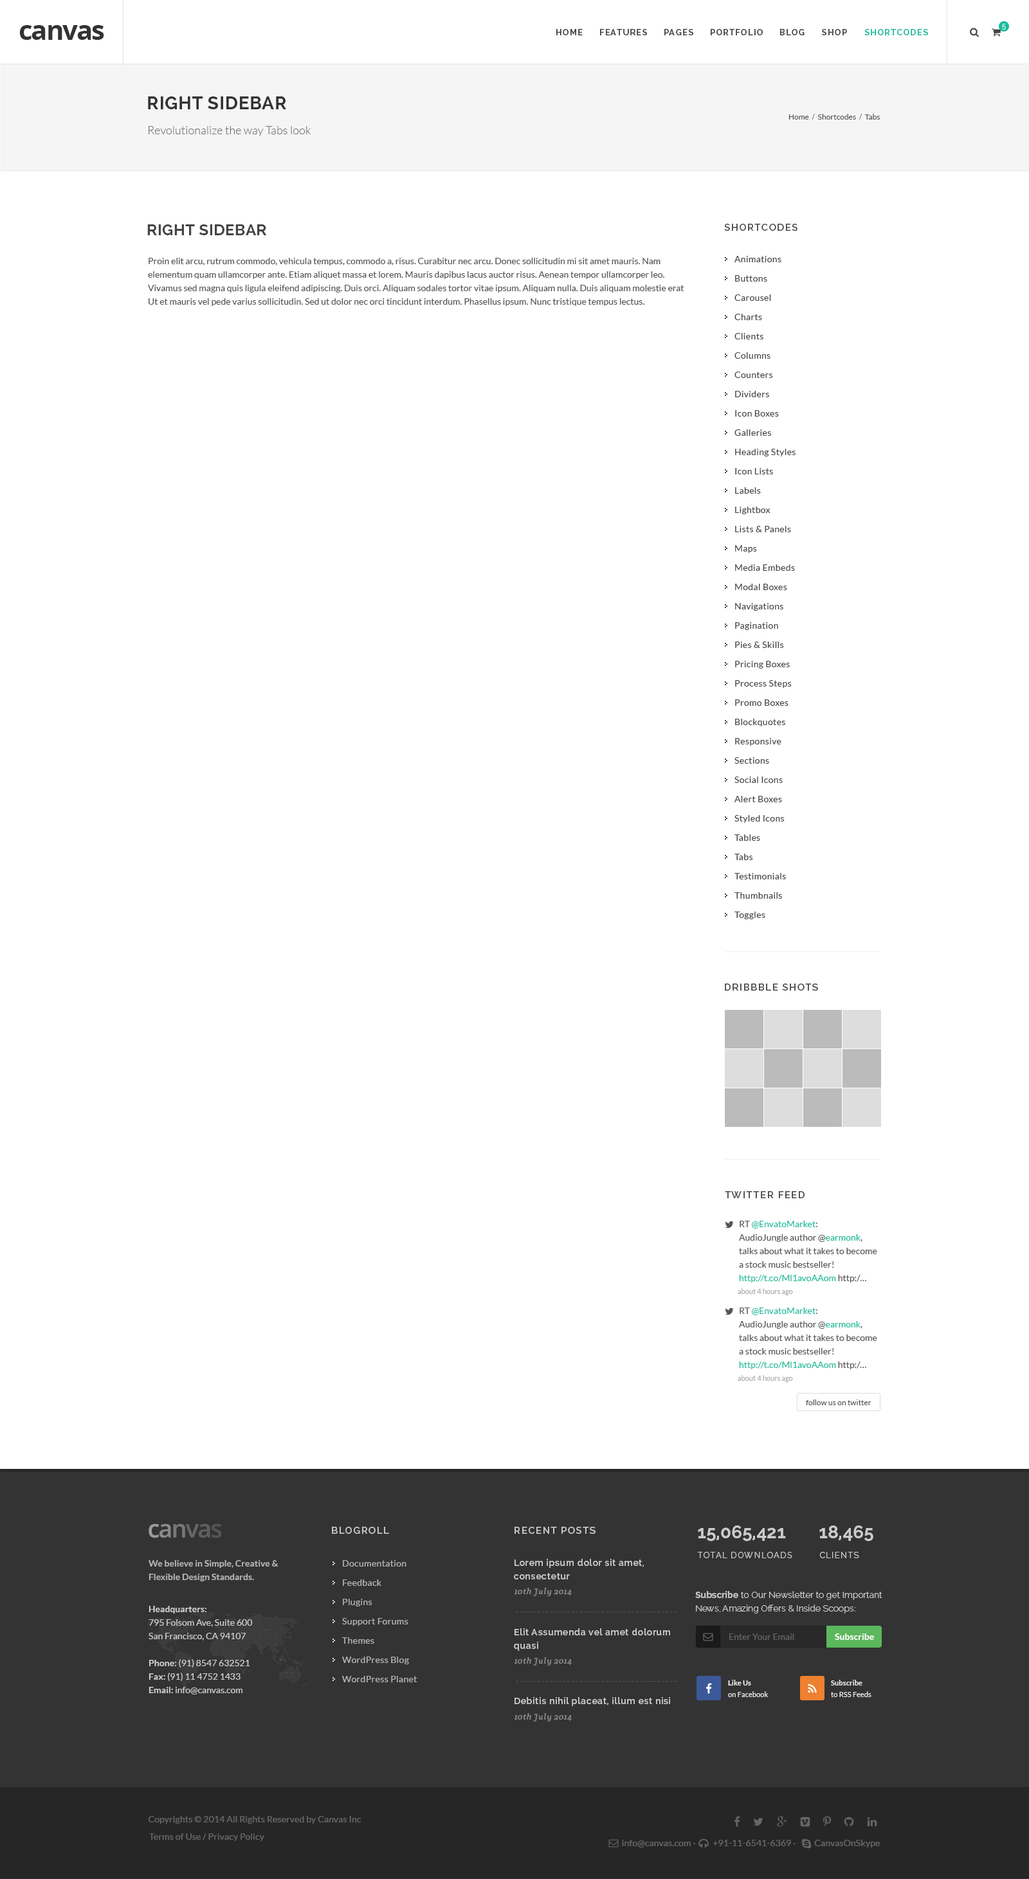
<style>
.page{position:relative;width:1029px;height:1879px;background:#ffffff}
.page>*{position:absolute;margin:0}
.t1{font:27px "OpenSans-Bold";letter-spacing:-0.05em;color:#333333}
.t2{font:8.4px "Raleway-Bold";letter-spacing:0.1em;color:#444444}
.t3{font:8.4px "Raleway-Bold";letter-spacing:0.1em;color:#1abc9c}
.t4{font:7.1px "Raleway-Light";letter-spacing:0.1em;color:#ffffff}
.t5{font:18px "Raleway-Bold";letter-spacing:0.025em;color:#333333;text-transform:uppercase}
.t6{font:7.7px "Lato-Regular";color:#555555}
.t7{font:7.7px "Lato-Regular";color:#777777}
.t8{font:11.6px "Lato-Light";color:#777777}
.t9{font:15.4px "Raleway-Bold";letter-spacing:0.025em;color:#444444;text-transform:uppercase}
.t10{font:9.6px "Raleway-SemiBold";letter-spacing:0.1em;color:#444444}
.t11{font:9px/13.5px "Lato-Regular";color:#555555}
.t12{font:9px/19.3px "Lato-Regular";letter-spacing:0.025em;color:#444444}
.t13{font:9.6px "Raleway-SemiBold";letter-spacing:0.1em;color:#444444;text-transform:uppercase}
.t14{font:9px/13.5px "Lato-Regular";color:#1abc9c}
.t15{font:7.1px "Lato-Regular";color:#aaaaaa}
.t16{font:9.6px "Raleway-SemiBold";letter-spacing:0.1em;color:#cccccc}
.t17{font:18px "Raleway-Bold";color:#cccccc}
.t18{font:8.4px "Raleway-Regular";letter-spacing:0.1em;color:#cacaca;text-transform:uppercase}
.t19{font:9px/13.5px "Lato-Bold";color:#cccccc}
.t20{font:9px/19.3px "Lato-Regular";letter-spacing:0.025em;color:#cccccc}
.t21{font:9px/13.5px "Raleway-SemiBold";letter-spacing:0.05em;color:#cccccc}
.t22{font:8.4px "CreteRound-Italic";letter-spacing:0.05em;color:#888888}
.t23{font:9px/13.5px "Raleway-Light";color:#cccccc}
.t24{font:9px/13.5px "Raleway-Bold";color:#cccccc}
.t25{font:9px/13.5px "Lato-Regular";color:#cccccc}
.t26{font:11.6px "Lato-Italic";letter-spacing:0.05em;color:#545454}
.t27{font:9px "Lato-Regular";color:#777777}
.t28{font:9px "Lato-Bold";color:#ffffff}
.t29{font:7.1px/11.6px "Lato-Regular";letter-spacing:0.01em;color:#eeeeee}
.t30{font:7.1px/11.6px "Lato-Bold";letter-spacing:0.01em;color:#eeeeee}
.t31{font:9px "Raleway-SemiBold";letter-spacing:0.05em;color:#cccccc}
.t32{font:9px "Lato-Regular";letter-spacing:0.01em;color:#666666}
</style>
<div class="page">
<p class="t1" style="left:19px;top:25px;width:85px;height:15px">canvas</p>
<p class="t2" style="left:556px;top:29px;width:26px;height:6px">HOME</p>
<p class="t2" style="left:600px;top:29px;width:47px;height:6px">FEATURES</p>
<p class="t2" style="left:664px;top:29px;width:29px;height:6px">PAGES</p>
<p class="t2" style="left:710px;top:29px;width:52px;height:6px">PORTFOLIO</p>
<p class="t2" style="left:780px;top:29px;width:24px;height:6px">BLOG</p>
<p class="t2" style="left:822px;top:29px;width:25px;height:6px">SHOP</p>
<p class="t3" style="left:864px;top:29px;width:64px;height:6px">SHORTCODES</p>
<p class="t4" style="left:1002px;top:24px;width:3px;height:6px">5</p>
<p class="t5" style="left:148px;top:96px;width:138px;height:13px">Right Sidebar</p>
<p class="t6" style="left:788px;top:114px;width:92px;height:6px">Home  <span class="t7">/ </span> Shortcodes  <span class="t7">/ </span> Tabs</p>
<p class="t8" style="left:148px;top:126px;width:163px;height:10px">Revolutionalize the way Tabs look</p>
<p class="t9" style="left:147px;top:224px;width:120px;height:11px">Right Sidebar</p>
<p class="t10" style="left:724px;top:224px;width:73px;height:7px">SHORTCODES</p>
<p class="t11" style="left:148px;top:258px;width:536px;height:48px">Proin elit arcu, rutrum commodo, vehicula tempus, commodo a, risus. Curabitur nec arcu. Donec sollicitudin mi sit amet mauris. Nam<br>elementum quam ullamcorper ante. Etiam aliquet massa et lorem. Mauris dapibus lacus auctor risus. Aenean tempor ullamcorper leo.<br>Vivamus sed magna quis ligula eleifend adipiscing. Duis orci. Aliquam sodales tortor vitae ipsum. Aliquam nulla. Duis aliquam molestie erat<br>Ut et mauris vel pede varius sollicitudin. Sed ut dolor nec orci tincidunt interdum. Phasellus ipsum. Nunc tristique tempus lectus.</p>
<p class="t12" style="left:734px;top:256px;width:61px;height:663px">Animations<br>Buttons<br>Carousel<br>Charts<br>Clients<br>Columns<br>Counters<br>Dividers<br>Icon Boxes<br>Galleries<br>Heading Styles<br>Icon Lists<br>Labels<br>Lightbox<br>Lists &amp; Panels<br>Maps<br>Media Embeds<br>Modal Boxes<br>Navigations<br>Pagination<br>Pies &amp; Skills<br>Pricing Boxes<br>Process Steps<br>Promo Boxes<br>Blockquotes<br>Responsive<br>Sections<br>Social Icons<br>Alert Boxes<br>Styled Icons<br>Tables<br>Tabs<br>Testimonials<br>Thumbnails<br>Toggles</p>
<p class="t13" style="left:724px;top:984px;width:94px;height:7px">Dribbble Shots</p>
<p class="t13" style="left:724px;top:1191px;width:80px;height:7px">Twitter feed</p>
<p class="t11" style="left:739px;top:1221px;width:138px;height:61px">RT <span class="t14">@EnvatoMarket</span>:<br>AudioJungle author @<span class="t14">earmonk</span>,<br>talks about what it takes to become<br>a stock music bestseller!<br><span class="t14">http://t.co/Ml1avoAAom </span>http:/…</p>
<p class="t15" style="left:737px;top:1288px;width:56px;height:7px">about 4 hours ago</p>
<p class="t11" style="left:739px;top:1308px;width:138px;height:61px">RT <span class="t14">@EnvatoMarket</span>:<br>AudioJungle author @<span class="t14">earmonk</span>,<br>talks about what it takes to become<br>a stock music bestseller!<br><span class="t14">http://t.co/Ml1avoAAom </span>http:/…</p>
<p class="t15" style="left:737px;top:1375px;width:56px;height:7px">about 4 hours ago</p>
<p class="t6" style="left:806px;top:1400px;width:65px;height:5px">follow us on twitter</p>
<p class="t16" style="left:332px;top:1527px;width:57px;height:7px">BLOGROLL</p>
<p class="t16" style="left:514px;top:1527px;width:81px;height:7px">RECENT POSTS</p>
<p class="t17" style="left:698px;top:1526px;width:88px;height:16px">15,065,421</p>
<p class="t17" style="left:819px;top:1526px;width:54px;height:16px">18,465</p>
<p class="t18" style="left:697px;top:1552px;width:95px;height:6px">TOTAL Downloads</p>
<p class="t18" style="left:819px;top:1552px;width:40px;height:6px">CLIENTS</p>
<p class="t19" style="left:148px;top:1560px;width:130px;height:21px;opacity:0.8">We believe in Simple, Creative &amp;<br>Flexible Design Standards.</p>
<p class="t20" style="left:342px;top:1560px;width:75px;height:122px;opacity:0.8">Documentation<br>Feedback<br>Plugins<br>Support Forums<br>Themes<br>WordPress Blog<br>WordPress Planet</p>
<p class="t21" style="left:514px;top:1559px;width:130px;height:21px">Lorem ipsum dolor sit amet,<br>consectetur</p>
<p class="t22" style="left:514px;top:1588px;width:58px;height:8px">10th July 2014</p>
<p class="t23" style="left:695px;top:1591px;width:187px;height:23px"><span class="t24">Subscribe</span> to Our Newsletter to get Important<br>News, Amazing Offers &amp; Inside Scoops:</p>
<p class="t25" style="left:148px;top:1606px;width:105px;height:89px"><span class="t19">Headquarters:<br></span>795 Folsom Ave, Suite 600<br>San Francisco, CA 94107<br><span class="t19"><br>Phone: </span>(91) 8547 632521<br><span class="t19">Fax: </span>(91) 11 4752 1433<br><span class="t19">Email: </span>info@canvas.com</p>
<p class="t26" style="left:515px;top:1612px;width:162px;height:0px">--------------------------------------</p>
<p class="t21" style="left:514px;top:1628px;width:156px;height:23px">Elit Assumenda vel amet dolorum<br>quasi</p>
<p class="t27" style="left:729px;top:1634px;width:65px;height:6px;opacity:0.7">Enter Your Email</p>
<p class="t28" style="left:834px;top:1634px;width:40px;height:6px">Subscribe</p>
<p class="t22" style="left:514px;top:1657px;width:58px;height:9px">10th July 2014</p>
<p class="t26" style="left:515px;top:1681px;width:162px;height:1px">--------------------------------------</p>
<p class="t29" style="left:728px;top:1680px;width:40px;height:17px"><span class="t30">Like Us<br></span>on Facebook</p>
<p class="t29" style="left:831px;top:1680px;width:40px;height:17px"><span class="t30">Subscribe<br></span>to RSS Feeds</p>
<p class="t31" style="left:514px;top:1697px;width:156px;height:9px">Debitis nihil placeat, illum est nisi</p>
<p class="t22" style="left:514px;top:1713px;width:58px;height:9px">10th July 2014</p>
<p class="t32" style="left:148px;top:1816px;width:213px;height:8px">Copyrights © 2014 All Rights Reserved by Canvas Inc</p>
<p class="t32" style="left:149px;top:1833px;width:115px;height:8px">Terms of Use / Privacy Policy</p>
<p class="t32" style="left:622px;top:1840px;width:257px;height:8px">info@canvas.com ·   +91-11-6541-6369 ·        CanvasOnSkype</p>
</div>
